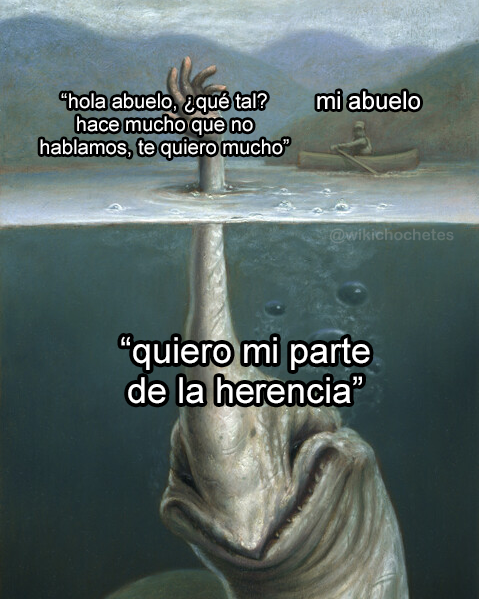
<style>
.page{position:relative;width:479px;height:599px}
.page>*{position:absolute;margin:0}
.t1{font:20.2px "ArialMT";color:#ffffff}
.t2{font:24.3px "ArialMT";color:#ffffff}
.t3{font:15.8px "ArialRoundedMTBold";color:#697977}
.t4{font:35.7px "ArialMT";color:#ffffff}
</style>
<div class="page">
<p class="t1" style="left:40px;top:93px;width:249px;height:65px;text-align:center">“hola abuelo, ¿qué tal?<br>hace mucho que no<br>hablamos, te quiero mucho”</p>
<p class="t2" style="left:317px;top:91px;width:103px;height:19px">mi abuelo</p>
<p class="t3" style="left:330px;top:228px;width:124px;height:16px">@wikichochetes</p>
<p class="t4" style="left:121px;top:336px;width:249px;height:68px;text-align:center">“quiero mi parte<br>de la herencia”</p>
</div>
